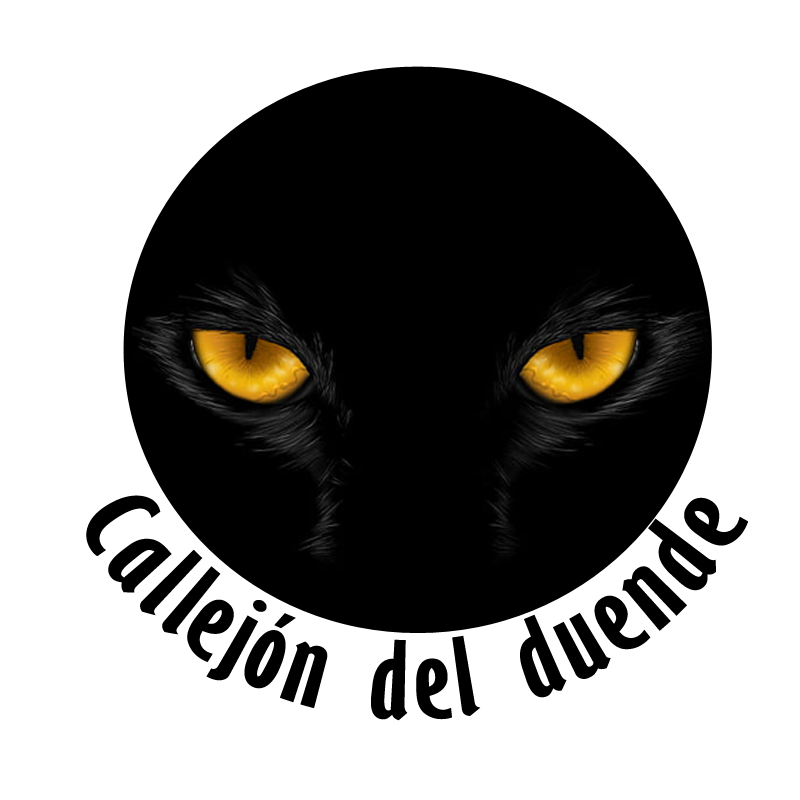
<style>
.page{position:relative;width:800px;height:800px;background:#ffffff}
.page>*{position:absolute;margin:0}
.t1{font:100px "GillSansMT-ExtraCondensedBold";color:#000000}
</style>
<div class="page">
<p class="t1" style="left:86px;top:495px;width:662px;height:226px">C a l le jó n  d e l  d u e n d e</p>
</div>
